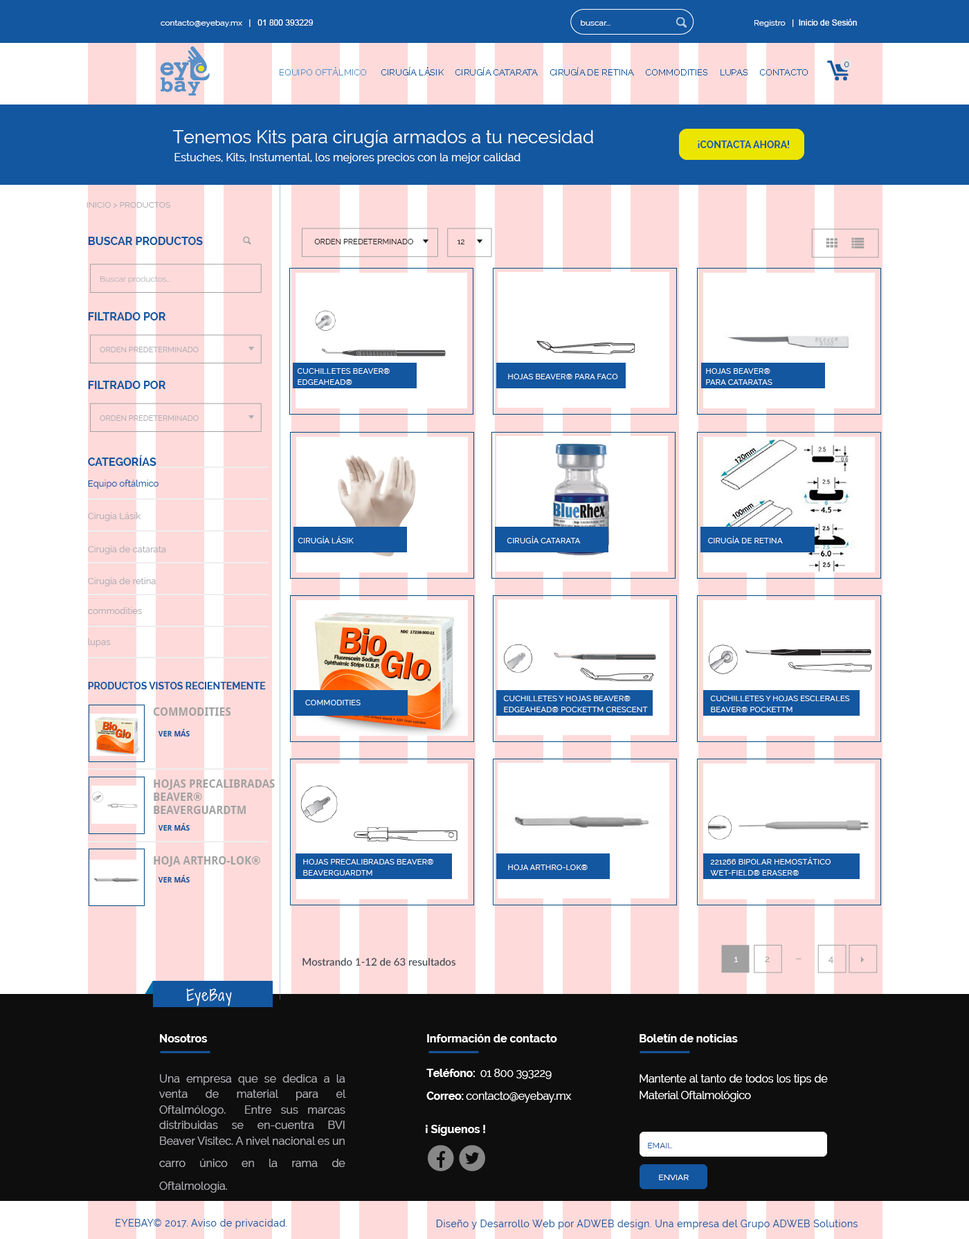
<style>
.page{position:relative;width:969px;height:1239px;background:#ffffff}
.page>*{position:absolute;margin:0}
.t1{font:8.3px "Raleway";color:#ffffff}
.t2{font:8.3px "ArialMT";color:#ffffff}
.t3{font:9px "Raleway";color:#1357a0;text-transform:uppercase}
.t4{font:18.1px "Raleway";color:#ffffff}
.t5{font:9.7px "Raleway-Bold";color:#1357a0;text-transform:uppercase}
.t6{font:11.1px "Raleway";color:#ffffff}
.t7{font:8.3px "Raleway";color:#afaeb4;text-transform:uppercase}
.t8{font:11.1px "Raleway-Bold";color:#1357a0;text-transform:uppercase}
.t9{font:7.6px "Raleway";color:#222121}
.t10{font:8.3px "Raleway-Light";color:#afaeb4}
.t11{font:7.6px "Raleway";color:#afaeb4}
.t12{font:8px/11.1px "Raleway";color:#ffffff;text-transform:uppercase}
.t13{font:8px "Raleway";color:#ffffff;text-transform:uppercase}
.t14{font:9px "Raleway";color:#1357a0}
.t15{font:9px "Raleway";color:#afaeb4}
.t16{font:11.1px "DroidSans-Bold";color:#a1a1a1;text-transform:uppercase}
.t17{font:7.6px "DroidSans-Bold";color:#1357a0;text-transform:uppercase}
.t18{font:10.4px "Lato-Medium";color:#3f4a52}
.t19{font:9px "Raleway";color:#ffffff}
.t20{font:9px "Raleway";color:#a1a1a1}
.t21{font:14.5px "ShadowsIntoLight";letter-spacing:0.08em;color:#ffffff}
.t22{font:11.1px/15.6px "Raleway";color:#afaeb4}
.t23{font:11.1px/22.5px "Raleway-Bold";color:#ffffff}
.t24{font:11.1px/22.5px "Raleway";color:#afaeb4}
.t25{font:11.1px/17px "Raleway-Bold";letter-spacing:-0.02em;color:#ffffff}
.t26{font:11.1px/11.5px "Raleway-Bold";letter-spacing:-0.02em;color:#ffffff}
.t27{font:11.1px/11.5px "Raleway";letter-spacing:-0.02em;color:#ffffff}
.t28{font:11.1px/17px "Raleway";letter-spacing:-0.02em;color:#ffffff}
.t29{font:11.1px "Raleway-Bold";color:#ffffff}
.t30{font:8.3px "Raleway";color:#1357a0;text-transform:uppercase}
.t31{font:8.3px "Raleway";color:#ffffff;text-transform:uppercase}
.t32{font:9.7px "Raleway";letter-spacing:0.04em;color:#1357a0}
</style>
<div class="page">
<p class="t1" style="left:161px;top:19px;width:152px;height:8px">contacto@eyebay.mx   <span class="t2">|   01 800 393229</span></p>
<p class="t1" style="left:581px;top:20px;width:30px;height:6px">buscar...</p>
<p class="t2" style="left:755px;top:19px;width:102px;height:8px"><span class="t1">Registro   </span>|  Inicio de Sesión</p>
<p class="t3" style="left:844px;top:62px;width:5px;height:5px">0</p>
<p class="t4" style="left:172px;top:130px;width:421px;height:17px">Tenemos Kits para cirugía armados a tu necesidad</p>
<p class="t5" style="left:698px;top:141px;width:92px;height:7px">¡Contacta ahora!</p>
<p class="t6" style="left:174px;top:153px;width:347px;height:11px">Estuches, Kits, Instumental, los mejores precios con la mejor calidad</p>
<p class="t7" style="left:87px;top:202px;width:83px;height:6px">inicio &gt; Productos</p>
<p class="t8" style="left:88px;top:237px;width:115px;height:8px">bUSCAR PRODUCTOS</p>
<p class="t9" style="left:314px;top:239px;width:99px;height:5px">ORDEN PREDETERMINADO</p>
<p class="t9" style="left:458px;top:240px;width:7px;height:4px">12</p>
<p class="t10" style="left:100px;top:276px;width:71px;height:7px">Buscar productos...</p>
<p class="t8" style="left:88px;top:312px;width:78px;height:9px">Filtrado por</p>
<p class="t11" style="left:100px;top:347px;width:99px;height:5px">ORDEN PREDETERMINADO</p>
<p class="t12" style="left:297px;top:368px;width:93px;height:17px">Cuchilletes Beaver® <br>EdgeAhead®</p>
<p class="t13" style="left:508px;top:374px;width:110px;height:5px">Hojas Beaver® para faco</p>
<p class="t12" style="left:706px;top:368px;width:67px;height:17px">Hojas Beaver® <br>para cataratas</p>
<p class="t8" style="left:88px;top:381px;width:78px;height:8px">Filtrado por</p>
<p class="t11" style="left:100px;top:415px;width:99px;height:6px">ORDEN PREDETERMINADO</p>
<p class="t8" style="left:88px;top:455px;width:68px;height:11px">CATEGORÍAS</p>
<p class="t14" style="left:88px;top:480px;width:71px;height:9px">Equipo oftálmico</p>
<p class="t15" style="left:88px;top:512px;width:53px;height:9px">Cirugía Lásik</p>
<p class="t15" style="left:88px;top:546px;width:78px;height:9px">Cirugía de catarata</p>
<p class="t13" style="left:298px;top:536px;width:56px;height:7px">Cirugía lásik</p>
<p class="t13" style="left:507px;top:536px;width:74px;height:7px">Cirugía Catarata</p>
<p class="t13" style="left:708px;top:536px;width:75px;height:7px">Cirugía de Retina</p>
<p class="t15" style="left:88px;top:577px;width:68px;height:9px">Cirugía de retina</p>
<p class="t15" style="left:88px;top:607px;width:54px;height:7px">commodities</p>
<p class="t15" style="left:88px;top:638px;width:23px;height:9px">lupas</p>
<p class="t5" style="left:88px;top:682px;width:178px;height:8px">productos vistos recientemente</p>
<p class="t13" style="left:305px;top:700px;width:56px;height:5px">Commodities</p>
<p class="t12" style="left:503px;top:696px;width:145px;height:16px">Cuchilletes y hojas Beaver® <br>EdgeAhead® PocketTM Crescent</p>
<p class="t12" style="left:710px;top:696px;width:140px;height:16px">Cuchilletes y hojas esclerales <br>Beaver® PocketTM</p>
<p class="t16" style="left:154px;top:708px;width:77px;height:8px">commodities</p>
<p class="t17" style="left:158px;top:729px;width:32px;height:8px">ver más</p>
<p class="t16" style="left:154px;top:780px;width:121px;height:34px">Hojas precalibradas <br>Beaver® <br>BeaverGuardTM</p>
<p class="t17" style="left:158px;top:823px;width:32px;height:8px">ver más</p>
<p class="t16" style="left:154px;top:856px;width:106px;height:11px">Hoja Arthro-Lok®</p>
<p class="t12" style="left:710px;top:857px;width:121px;height:19px">221266 Bipolar hemostático <br>Wet-Field® Eraser®</p>
<p class="t12" style="left:303px;top:859px;width:130px;height:17px">Hojas precalibradas Beaver® <br>BeaverGuardTM</p>
<p class="t13" style="left:508px;top:865px;width:80px;height:5px">Hoja Arthro-Lok®</p>
<p class="t17" style="left:158px;top:875px;width:32px;height:8px">ver más</p>
<p class="t18" style="left:303px;top:957px;width:153px;height:9px">Mostrando 1-12 de 63 resultados</p>
<p class="t19" style="left:735px;top:957px;width:3px;height:5px">1</p>
<p class="t20" style="left:765px;top:957px;width:5px;height:5px">2</p>
<p class="t20" style="left:829px;top:957px;width:5px;height:7px">4</p>
<p class="t21" style="left:186px;top:989px;width:46px;height:18px">EyeBay</p>
<p class="t22" style="left:159px;top:1034px;width:187px;height:159px;text-align:justify"><span class="t23">Nosotros<br><br></span><span class="t24">U</span>na empresa que se dedica a la venta de material para el Oftalmólogo.  Entre sus marcas distribuidas se en-cuentra BVI Beaver Visitec. A nivel nacional es un carro único en <span class="t24">la rama de Oftalmología.</span></p>
<p class="t23" style="left:426px;top:1034px;width:146px;height:69px;text-align:justify">Información de contacto<br><br><span class="t25">T</span><span class="t26">eléfono: </span><span class="t27"> 01 800 393229  <br><br></span><span class="t26">Correo: </span><span class="t27">contacto@eyebay.mx</span></p>
<p class="t28" style="left:640px;top:1034px;width:188px;height:68px;text-align:justify"><span class="t23">Boletín de noticias<br><br></span>Mantente al tanto de todos los tips de Material Oftalmológico</p>
<p class="t29" style="left:426px;top:1125px;width:59px;height:11px">¡ Síguenos !</p>
<p class="t30" style="left:648px;top:1143px;width:25px;height:6px">EMAIL</p>
<p class="t31" style="left:659px;top:1175px;width:30px;height:5px">enviar</p>
<p class="t32" style="left:116px;top:1219px;width:171px;height:10px">EYEBAY© 2017. Aviso de privacidad.</p>
<p class="t32" style="left:436px;top:1220px;width:422px;height:10px">Diseño y Desarrollo Web por ADWEB design. Una empresa del Grupo ADWEB Solutions</p>
</div>
